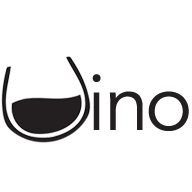
<style>
.page{position:relative;width:192px;height:192px;background:#ffffff}
.page>*{position:absolute;margin:0}
.t1{font:80px "Avenir-Book";letter-spacing:-0.02em;color:#231f20}
</style>
<div class="page">
<p class="t1" style="left:92px;top:74px;width:51px;height:56px">in</p>
<p class="t1" style="left:148px;top:91px;width:41px;height:40px">o</p>
</div>
